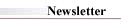
<style>
.page{position:relative;width:135px;height:20px;background:#ffffff}
.page>*{position:absolute;margin:0}
.t1{font:13px "TimesNewRomanPS-BoldMT";color:#000000}
</style>
<div class="page">
<p class="t1" style="left:47px;top:6px;width:59px;height:10px">Newsletter</p>
</div>
